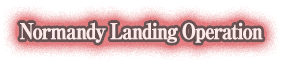
<style>
.page{position:relative;width:283px;height:65px;background:#ffffff}
.page>*{position:absolute;margin:0}
.t1{font:22px "RyuminPro-ExBold";letter-spacing:-0.08em;color:#ffeaea;font-weight:bold;scale:0.85 1}
</style>
<div class="page">
<p class="t1" style="left:20px;top:22px;width:243px;height:21px">Normandy Landing Operation</p>
</div>
